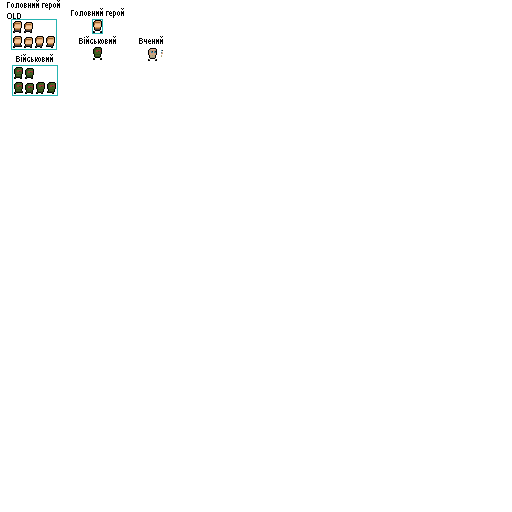
<style>
.page{position:relative;width:512px;height:512px;background:#ffffff}
.page>*{position:absolute;margin:0}
.t1{font:9px "ArialNarrow";color:#000000}
.t2{font:9.1px "ArialNarrow";color:#000000}
</style>
<div class="page">
<p class="t1" style="left:7px;top:0px;width:53px;height:19px">Головний герой<br>OLD</p>
<p class="t2" style="left:71px;top:8px;width:53px;height:10px">Головний герой</p>
<p class="t2" style="left:79px;top:36px;width:37px;height:8px">Військовий</p>
<p class="t2" style="left:139px;top:36px;width:24px;height:8px">Вчений</p>
<p class="t2" style="left:16px;top:54px;width:37px;height:8px">Військовий</p>
</div>
